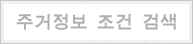
<style>
.page{position:relative;width:193px;height:44px;background:#ffffff}
.page>*{position:absolute;margin:0}
.t1{font:18px "KyunKo";color:#b2afaf}
</style>
<div class="page">
<p class="t1" style="left:16px;top:13px;width:160px;height:17px">주거정보 조건 검색</p>
</div>
